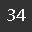
<style>
.page{position:relative;width:32px;height:32px;background:#333333}
.page>*{position:absolute;margin:0}
.t1{font:17.8px "MyriadPro-Regular";color:#ffffff;scale:1.12 1}
</style>
<div class="page">
<p class="t1" style="left:7px;top:9px;width:19px;height:12px">34</p>
</div>
